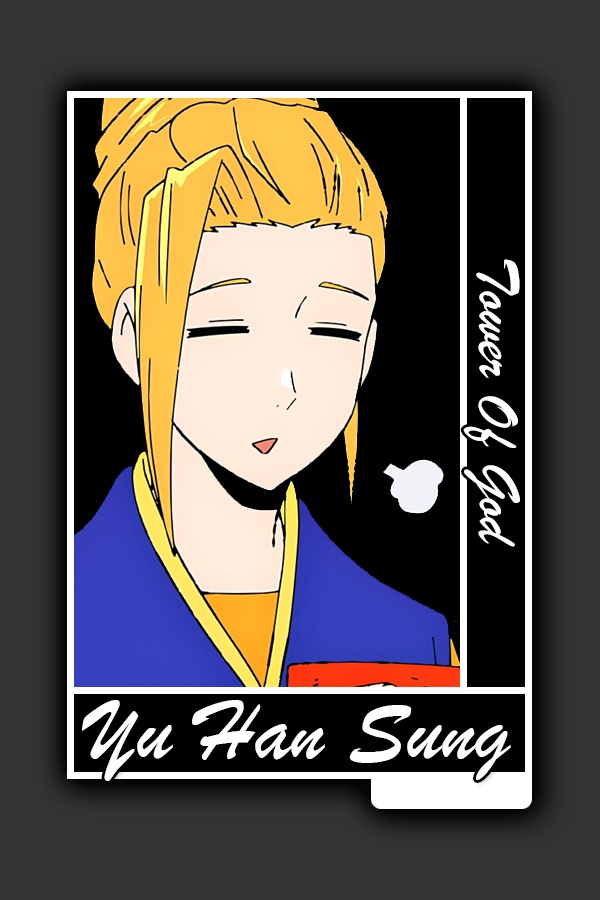
<style>
.page{position:relative;width:600px;height:900px;background:#333333}
.page>*{position:absolute;margin:0}
.t1{font:61.5px "BrushScriptMT";color:#ffffff}
.t2{font:89.7px "BrushScriptMT";color:#ffffff}
</style>
<div class="page">
<p class="t1" style="left:463px;top:259px;width:57px;height:288px;rotate:90deg">Tower Of God</p>
<p class="t2" style="left:82px;top:700px;width:429px;height:81px">Yu Han Sung</p>
</div>
